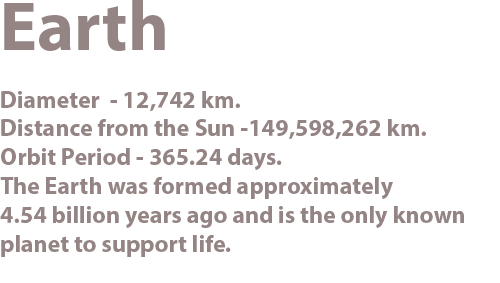
<style>
.page{position:relative;width:500px;height:283px;background:#ffffff}
.page>*{position:absolute;margin:0}
.t1{font:24px "MyriadHebrew-Bold";color:#887777}
.t2{font:70px "MyriadHebrew-Bold";color:#887777}
</style>
<div class="page">
<p class="t1" style="left:0px;top:0px;width:464px;height:257px;text-align:right;opacity:0.9"><span class="t2">Earth<br><br></span>Diameter  - 12,742 km.<br>Distance from the Sun -149,598,262 km.<br>Orbit Period - 365.24 days.<br>The Earth was formed approximately<br>4.54 billion years ago and is the only known<br>planet to support life.</p>
</div>
